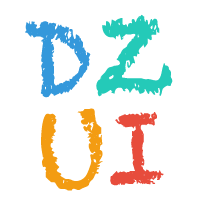
<style>
.page{position:relative;width:200px;height:200px;background:#ffffff}
.page>*{position:absolute;margin:0}
.t1{font:102.1px "Chalkduster";color:#3498db}
.t2{font:102.1px "Chalkduster";color:#24cab8}
.t3{font:99px "Chalkduster";color:#f39c12}
.t4{font:99px "Chalkduster";color:#e74c3c}
</style>
<div class="page">
<p class="t1" style="left:25px;top:14px;width:148px;height:84px">D<span class="t2">Z</span></p>
<p class="t3" style="left:41px;top:108px;width:123px;height:83px">U<span class="t4">I</span></p>
</div>
